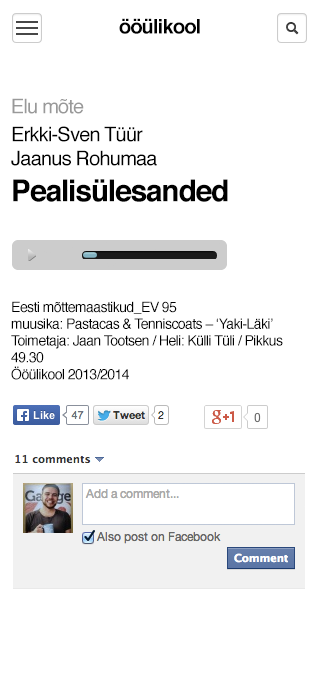
<style>
.page{position:relative;width:320px;height:700px;background:#ffffff}
.page>*{position:absolute;margin:0}
.t1{font:20px "Helvetica-Bold";letter-spacing:-0.04em;color:#000000}
.t2{font:20px "Helvetica";letter-spacing:-0.04em;color:#999999}
.t3{font:20px "Helvetica";letter-spacing:-0.04em;color:#000000}
.t4{font:30px "Helvetica-Bold";letter-spacing:-0.04em;color:#000000}
.t5{font:14px "Helvetica";letter-spacing:-0.04em;color:#000000}
</style>
<div class="page">
<p class="t1" style="left:119px;top:18px;width:81px;height:16px">ööülikool</p>
<p class="t2" style="left:12px;top:98px;width:72px;height:16px">Elu mõte</p>
<p class="t3" style="left:11px;top:126px;width:217px;height:76px">Erkki-Sven Tüür<br>Jaanus Rohumaa<br><span class="t4">Pealisülesanded</span></p>
<p class="t5" style="left:11px;top:301px;width:272px;height:79px">Eesti mõttemaastikud_EV 95<br>muusika: Pastacas &amp; Tenniscoats – ‘Yaki-Läki’<br>Toimetaja: Jaan Tootsen / Heli: Külli Tüli / Pikkus 49.30<br>Ööülikool 2013/2014</p>
</div>
